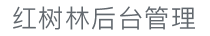
<style>
.page{position:relative;width:210px;height:36px;background:#ffffff}
.page>*{position:absolute;margin:0}
.t1{font:25px "PingFangSC-Light";letter-spacing:0.06em;color:#62686e}
</style>
<div class="page">
<p class="t1" style="left:13px;top:6px;width:182px;height:24px">红树林后台管理</p>
</div>
